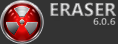
<style>
.page{position:relative;width:118px;height:44px;background:#333333}
.page>*{position:absolute;margin:0}
.t1{font:18.4px "SegoeUI-Bold"}
.t2{font:10px "SegoeUI-Bold";color:#a2a2a2}
</style>
<div class="page">
<p class="t1" style="left:50px;top:2px;width:67px;height:15px">ERASER</p>
<p class="t2" style="left:93px;top:18px;width:23px;height:7px">6.0.6</p>
</div>
